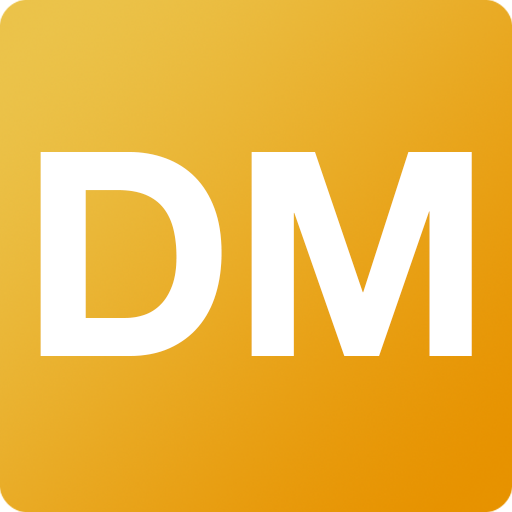
<style>
.page{position:relative;width:512px;height:512px;background:#ffffff}
.page>*{position:absolute;margin:0}
.t1{font:285.7px "HelveticaNeue-Bold";color:#ffffff;text-transform:uppercase}
</style>
<div class="page">
<p class="t1" style="left:40px;top:152px;width:432px;height:204px">DM</p>
</div>
